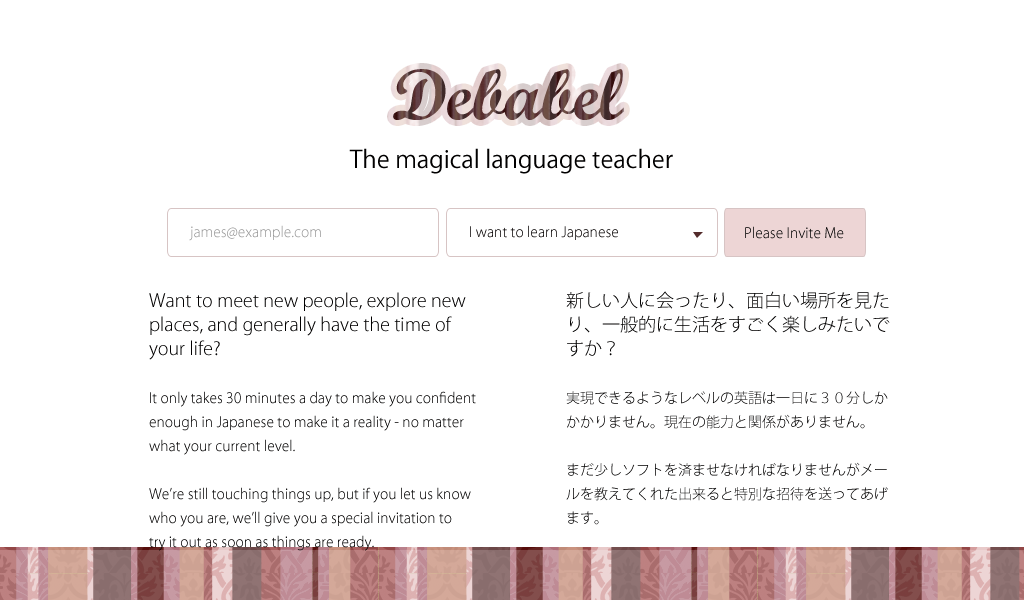
<style>
.page{position:relative;width:1024px;height:600px;background:#ffffff}
.page>*{position:absolute;margin:0}
.t1{font:72px "WrexhamScript"}
.t2{font:24px "KozGoPro-Regular";color:#010000}
.t3{font:14px "KozGoPro-Light";color:#989898}
.t4{font:14px "KozGoPro-Light"}
.t5{font:14px/24px "KozGoPro-Light";color:#010000}
.t6{font:18px/24px "KozGoPro-Light";color:#010000}
</style>
<div class="page">
<p class="t1" style="left:393px;top:69px;width:231px;height:51px">Debabel</p>
<p class="t2" style="left:349px;top:148px;width:324px;height:26px">The magical language teacher</p>
<p class="t3" style="left:189px;top:225px;width:132px;height:16px">james@example.com</p>
<p class="t4" style="left:470px;top:225px;width:148px;height:15px">I want to learn Japanese</p>
<p class="t4" style="left:745px;top:226px;width:99px;height:13px">Please Invite Me</p>
<p class="t5" style="left:149px;top:292px;width:327px;height:259px"><span class="t6">Want to meet new people, explore new <br>places, and generally have the time of <br>your life? <br></span><br>It only takes 30 minutes a day to make you confident <br>enough in Japanese to make it a reality - no matter<br>what your current level.<br><br>We’re still touching things up, but if you let us know<br>who you are, we’ll give you a special invitation to<br>try it out as soon as things are ready.</p>
<p class="t5" style="left:566px;top:291px;width:324px;height:234px"><span class="t6">新しい人に会ったり、面白い場所を見た<br>り、一般的に生活をすごく楽しみたいで<br>すか？<br><br></span>実現できるようなレベルの英語は一日に３０分しか<br>かかりません。現在の能力と関係がありません。<br><br>まだ少しソフトを済ませなければなりませんがメー<br>ルを教えてくれた出来ると特別な招待を送ってあげ<br>ます。</p>
</div>
